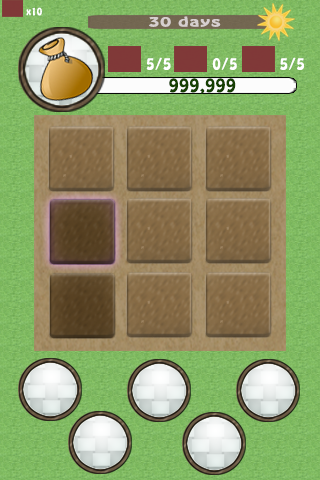
<style>
.page{position:relative;width:320px;height:480px}
.page>*{position:absolute;margin:0}
.t1{font:9px "HoboStd";letter-spacing:0.04em;color:#ffffff}
.t2{font:11.5px "HoboStd";letter-spacing:0.04em;color:#d6cfcf;scale:1.66 1}
.t3{font:14px "HoboStd";letter-spacing:0.04em;color:#ffffff}
.t4{font:16.7px "HoboStd";letter-spacing:0.04em;color:#163f03}
</style>
<div class="page">
<p class="t1" style="left:26px;top:7px;width:16px;height:9px">x10</p>
<p class="t2" style="left:149px;top:16px;width:72px;height:11px">30 days</p>
<p class="t3" style="left:146px;top:57px;width:25px;height:13px">5/5</p>
<p class="t3" style="left:212px;top:57px;width:25px;height:13px">0/5</p>
<p class="t3" style="left:280px;top:57px;width:24px;height:13px">5/5</p>
<p class="t4" style="left:169px;top:78px;width:67px;height:16px">999,999</p>
</div>
